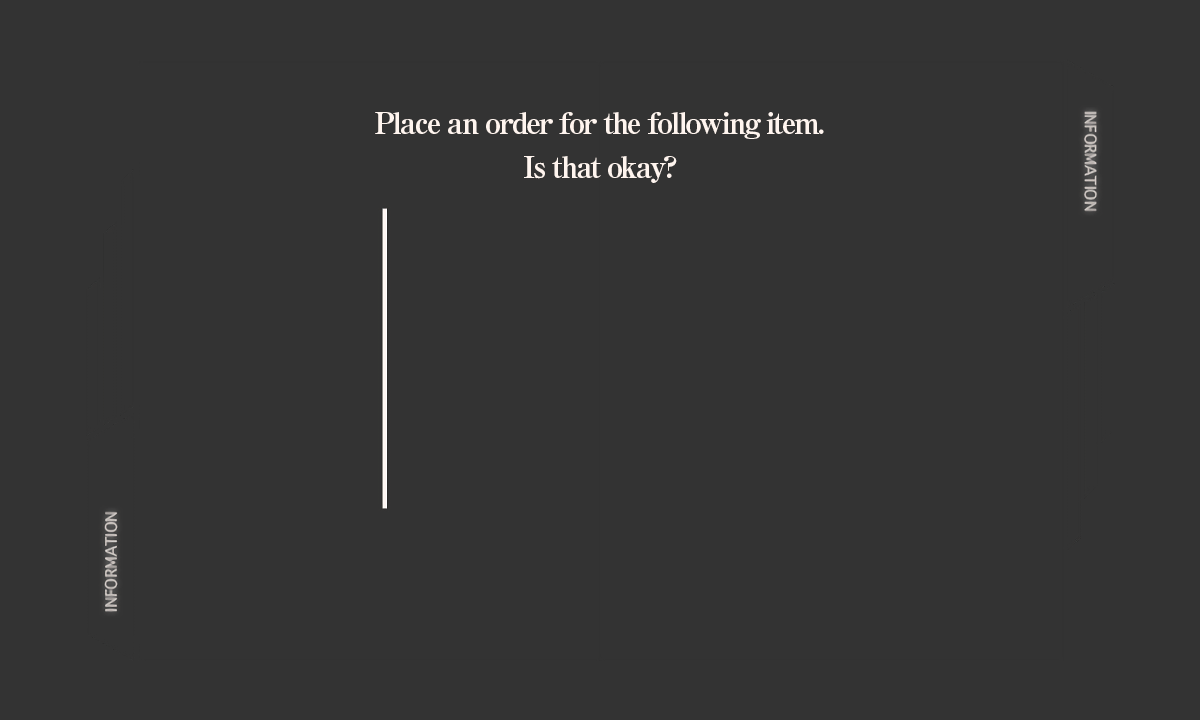
<style>
.page{position:relative;width:1200px;height:720px;background:#333333}
.page>*{position:absolute;margin:0}
.t1{font:30px/44px "RyuminPro-ExBold";letter-spacing:-0.08em;color:#fff5ef}
</style>
<div class="page">
<p class="t1" style="left:375px;top:112px;width:449px;height:71px;text-align:center">Place an order for the following item.<br>Is that okay?</p>
</div>
